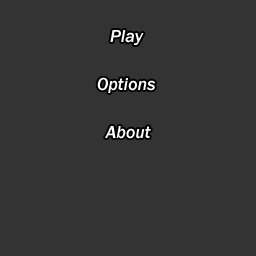
<style>
.page{position:relative;width:256px;height:256px;background:#333333}
.page>*{position:absolute;margin:0}
.t1{font:18px "FranklinGothic-MediumItalic";color:#ffffff}
</style>
<div class="page">
<p class="t1" style="left:110px;top:30px;width:34px;height:15px">Play</p>
<p class="t1" style="left:97px;top:77px;width:59px;height:16px">Options</p>
<p class="t1" style="left:105px;top:126px;width:46px;height:13px">About</p>
</div>
